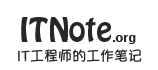
<style>
.page{position:relative;width:158px;height:70px;background:#ffffff}
.page>*{position:absolute;margin:0}
.t1{font:30px "HoboStd";color:#282727}
.t2{font:12px "CharcoalCY";color:#282727}
.t3{font:14px "YuppySC-Regular";color:#282727}
</style>
<div class="page">
<p class="t1" style="left:21px;top:17px;width:115px;height:27px">ITNote<span class="t2">.org</span></p>
<p class="t3" style="left:18px;top:49px;width:124px;height:13px">IT工程师的工作笔记</p>
</div>
